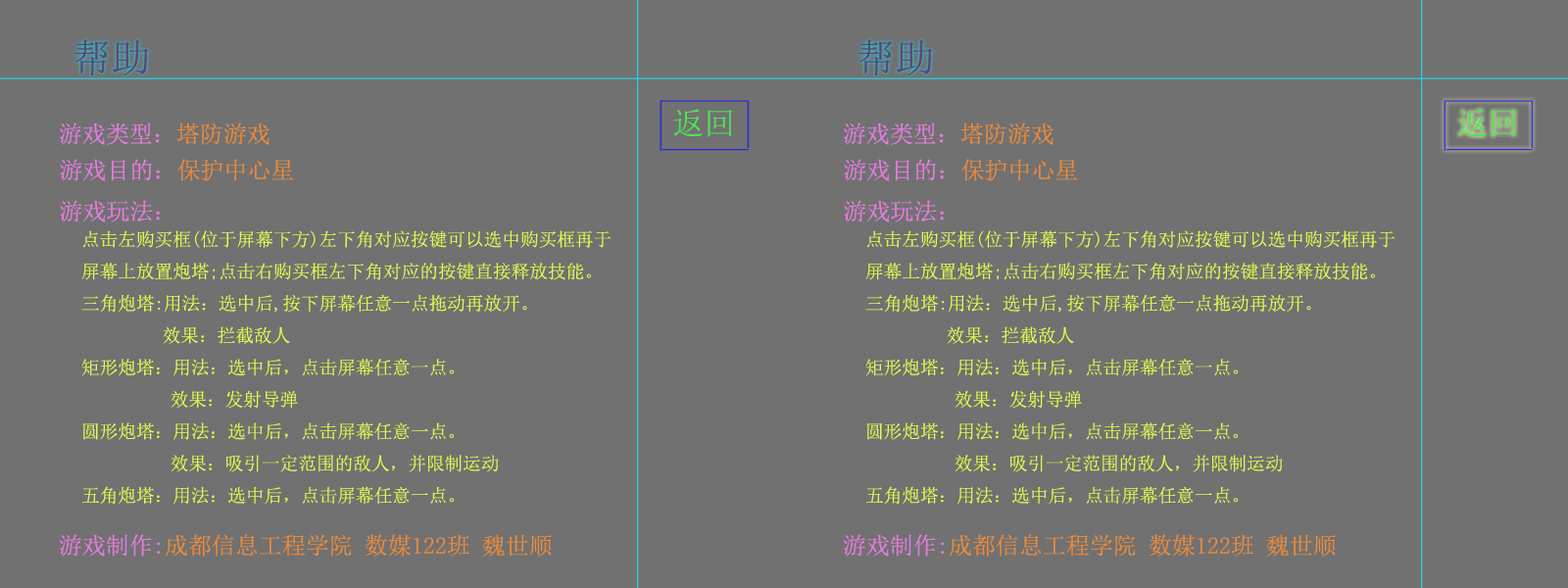
<style>
.page{position:relative;width:1568px;height:588px;background:#717171}
.page>*{position:absolute;margin:0}
.t1{font:23.5px "SimSun";color:#e77be1}
.t2{font:23.5px "SimSun";color:#eb8a3b}
.t3{font:18.3px "SimSun";color:#dafd4e}
</style>
<div class="page">
<p class="t1" style="left:60px;top:159px;width:234px;height:63px">游戏目的：<span class="t2">保护中心星<br></span>游戏玩法：</p>
<p class="t1" style="left:844px;top:159px;width:234px;height:63px">游戏目的：<span class="t2">保护中心星<br></span>游戏玩法：</p>
<p class="t3" style="left:81px;top:230px;width:531px;height:275px">点击左购买框(位于屏幕下方)左下角对应按键可以选中购买框再于屏幕上放置炮塔;点击右购买框左下角对应的按键直接释放技能。<br>三角炮塔:用法：选中后,按下屏幕任意一点拖动再放开。<br>      效果：拦截敌人<br>矩形炮塔：用法：选中后，点击屏幕任意一点。<br>    效果：发射导弹<br>圆形炮塔：用法：选中后，点击屏幕任意一点。<br>       效果：吸引一定范围的敌人，并限制运动<br>五角炮塔：用法：选中后，点击屏幕任意一点。<br>    效果：爆炸，威力巨大。<br>注意：mp值(位于右上角)不足不可购买相应道具，相应mp值见各购买框；技能有什么效果，不妨去试试吧。</p>
<p class="t3" style="left:865px;top:230px;width:531px;height:275px">点击左购买框(位于屏幕下方)左下角对应按键可以选中购买框再于屏幕上放置炮塔;点击右购买框左下角对应的按键直接释放技能。<br>三角炮塔:用法：选中后,按下屏幕任意一点拖动再放开。<br>      效果：拦截敌人<br>矩形炮塔：用法：选中后，点击屏幕任意一点。<br>    效果：发射导弹<br>圆形炮塔：用法：选中后，点击屏幕任意一点。<br>       效果：吸引一定范围的敌人，并限制运动<br>五角炮塔：用法：选中后，点击屏幕任意一点。<br>    效果：爆炸，威力巨大。<br>注意：mp值(位于右上角)不足不可购买相应道具，相应mp值见各购买框；技能有什么效果，不妨去试试吧。</p>
</div>
